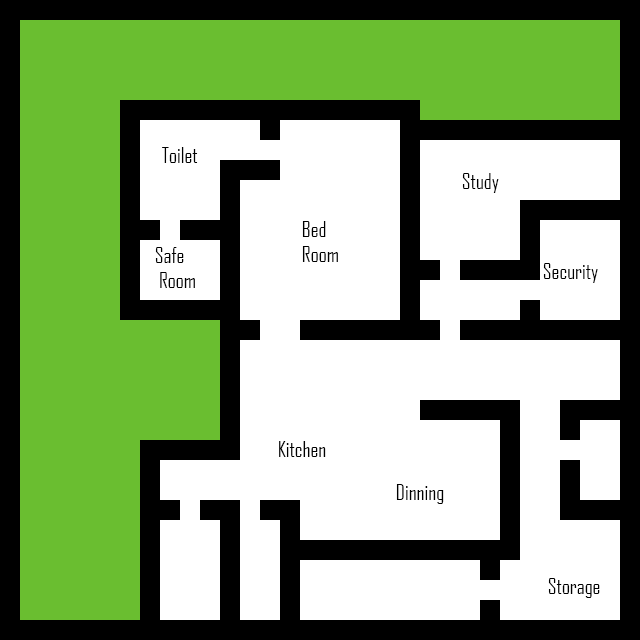
<style>
.page{position:relative;width:640px;height:640px;background:#ffffff}
.page>*{position:absolute;margin:0}
.t1{font:21px "AgencyFB-Reg";color:#000000}
</style>
<div class="page">
<p class="t1" style="left:162px;top:147px;width:36px;height:16px">Toilet</p>
<p class="t1" style="left:462px;top:173px;width:37px;height:20px">Study</p>
<p class="t1" style="left:302px;top:221px;width:36px;height:41px">Bed <br>Room</p>
<p class="t1" style="left:155px;top:247px;width:40px;height:41px">Safe<br> Room</p>
<p class="t1" style="left:543px;top:263px;width:55px;height:20px">Security</p>
<p class="t1" style="left:279px;top:441px;width:47px;height:16px">Kitchen</p>
<p class="t1" style="left:396px;top:484px;width:48px;height:20px">Dinning</p>
<p class="t1" style="left:548px;top:578px;width:52px;height:20px">Storage</p>
</div>
